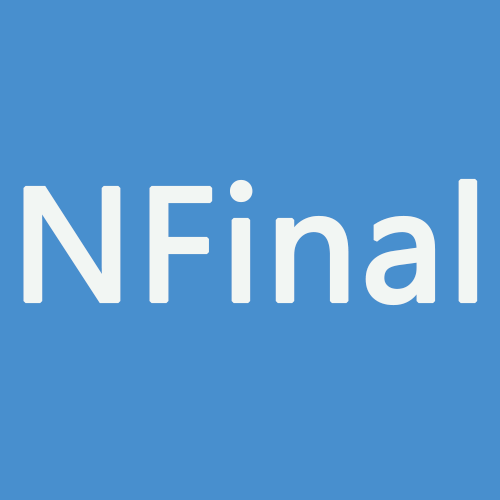
<style>
.page{position:relative;width:500px;height:500px;background:#488fce}
.page>*{position:absolute;margin:0}
.t1{font:150px "MicrosoftYaHei";color:#f2f6f3;font-weight:bold}
</style>
<div class="page">
<p class="t1" style="left:23px;top:178px;width:455px;height:128px">NFinal</p>
</div>
